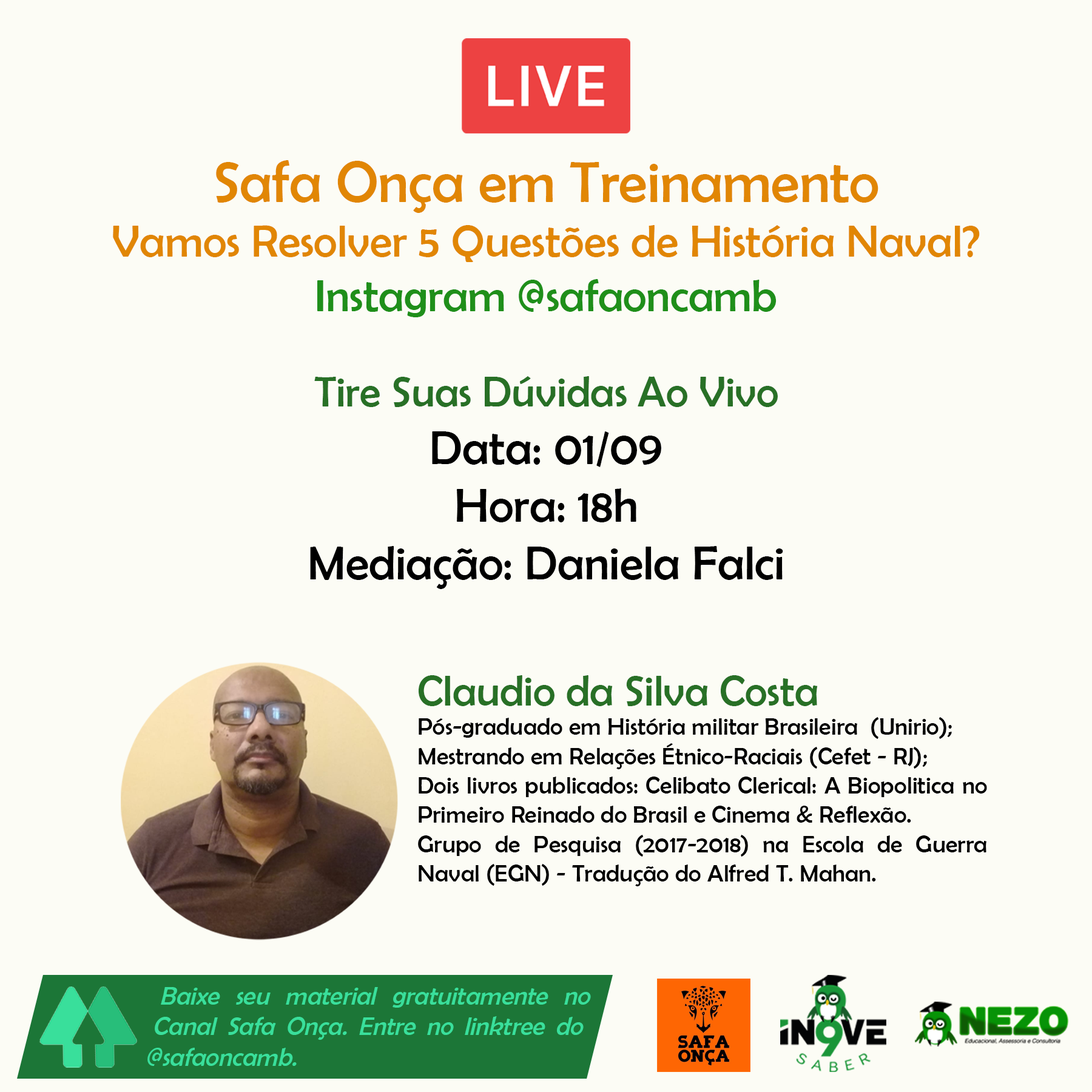
<style>
.page{position:relative;width:1092px;height:1092px;background:#fcfcf5}
.page>*{position:absolute;margin:0}
.t1{font:45.5px "BerlinSansFB-Reg";color:#e18604}
.t2{font:58.1px "BerlinSansFB-Reg";color:#e18604}
.t3{font:45.5px "BerlinSansFB-Reg";color:#1f8f1a}
.t4{font:24.4px "BerlinSansFB-Reg";color:#000000}
.t5{font:43px "BerlinSansFB-Reg";color:#287026}
.t6{font:48px "BerlinSansFB-Reg";color:#000000}
.t7{font:43px/80.9px "BerlinSansFB-Reg";color:#287026}
.t8{font:26.3px "BerlinSansFB-Reg";color:#39df9b}
</style>
<div class="page">
<p class="t1" style="left:113px;top:160px;width:867px;height:157px;text-align:center"><span class="t2">Safa Onça em Treinamento<br></span>Vamos Resolver 5 Questões de História Naval?<br><span class="t3">Instagram @safaoncamb</span></p>
<p class="t4" style="left:310px;top:376px;width:677px;height:510px;text-align:center"><span class="t5">Tire Suas Dúvidas Ao Vivo<br></span><span class="t6">Data: 01/09<br>Hora: 18h<br>Mediação: Daniela Falci<br><br></span><span class="t7">Claudio da Silva Costa<br></span>Pós-graduado em História militar Brasileira  (Unirio);<br>Mestrando em Relações Étnico-Raciais (Cefet - RJ);<br>Dois livros publicados: Celibato Clerical: A Biopolitica no Primeiro Reinado do Brasil e Cinema &amp; Reflexão. <br>Grupo de Pesquisa (2017-2018) na Escola de Guerra Naval (EGN) - Tradução do Alfred T. Mahan.</p>
<p class="t8" style="left:147px;top:987px;width:444px;height:79px;text-align:justify">Baixe seu material gratuitamente no Canal Safa Onça. Entre no linktree do @safaoncamb.</p>
</div>
